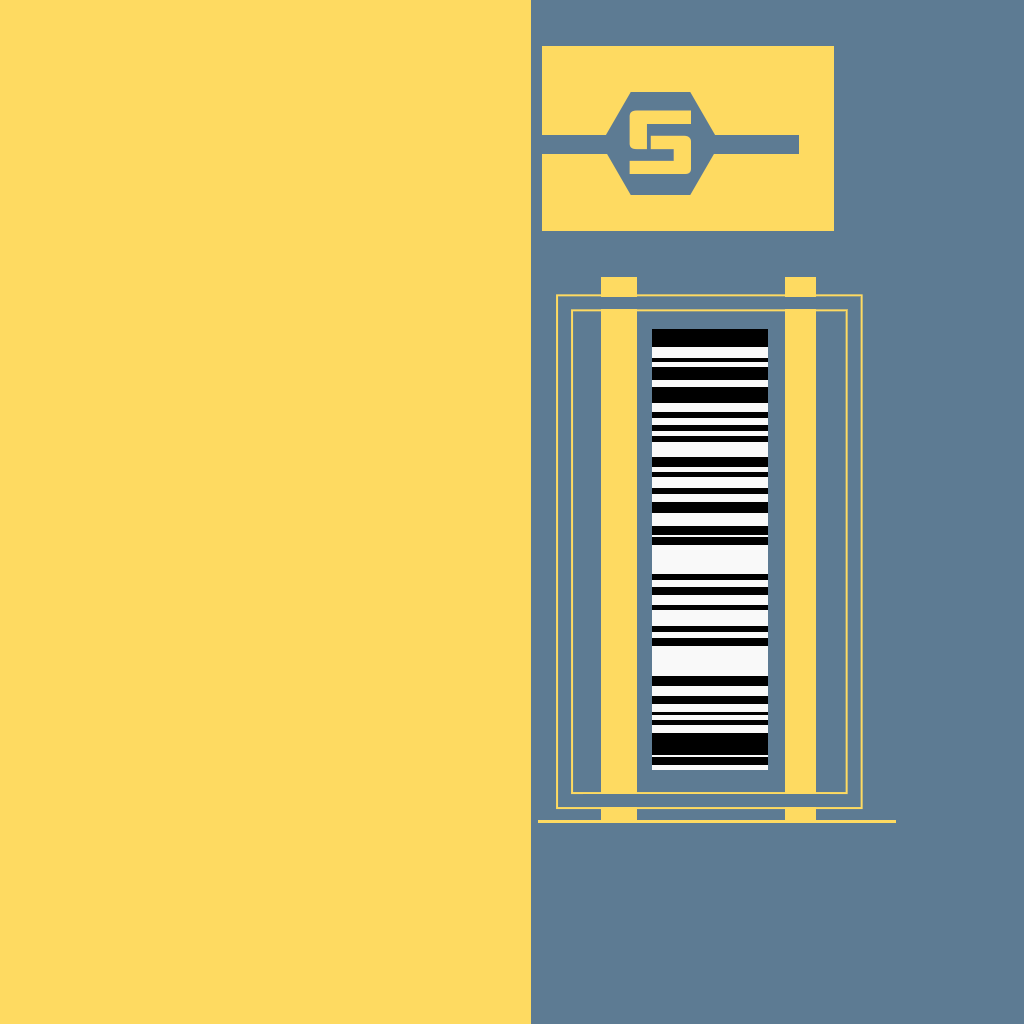
<style>
.page{position:relative;width:1024px;height:1024px;background:#feda61}
.page>*{position:absolute;margin:0}
.t1{font:152px "VikingSquad";color:#feda61}
</style>
<div class="page">
<p class="t1" style="left:629px;top:110px;width:62px;height:64px">s</p>
</div>
